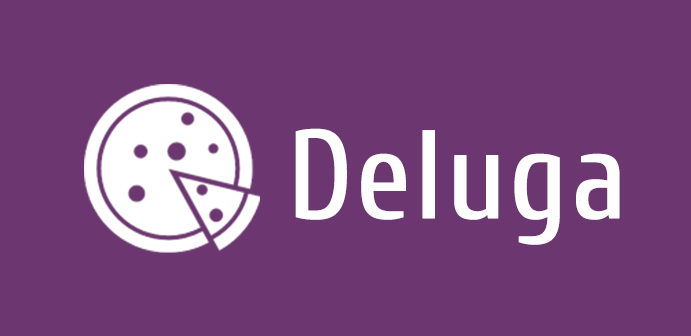
<style>
.page{position:relative;width:691px;height:336px;background:#6c3670}
.page>*{position:absolute;margin:0}
.t1{font:125px "Cuprum-Regular";color:#ffffff;font-weight:bold}
</style>
<div class="page">
<p class="t1" style="left:295px;top:128px;width:325px;height:117px">Deluga</p>
</div>
